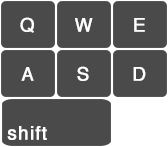
<style>
.page{position:relative;width:168px;height:147px;background:#4a4a4a}
.page>*{position:absolute;margin:0}
.t1{font:18.7px "Helvetica";letter-spacing:0.05em;color:#ffffff;font-weight:bold}
</style>
<div class="page">
<p class="t1" style="left:20px;top:17px;width:14px;height:16px">Q</p>
<p class="t1" style="left:75px;top:18px;width:18px;height:14px">W</p>
<p class="t1" style="left:134px;top:18px;width:11px;height:14px">E</p>
<p class="t1" style="left:21px;top:67px;width:13px;height:14px">A</p>
<p class="t1" style="left:77px;top:66px;width:12px;height:15px">S</p>
<p class="t1" style="left:133px;top:67px;width:13px;height:14px">D</p>
<p class="t1" style="left:7px;top:126px;width:40px;height:14px">shift</p>
</div>
